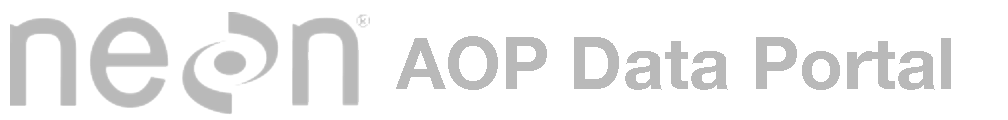
<style>
.page{position:relative;width:1008px;height:120px;background:#ffffff}
.page>*{position:absolute;margin:0}
.t1{font:72px "HelveticaNeue-Bold";color:#b9b9b9}
</style>
<div class="page">
<p class="t1" style="left:396px;top:36px;width:555px;height:54px">AOP Data Portal</p>
</div>
